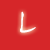
<style>
.page{position:relative;width:50px;height:50px;background:#d62629}
.page>*{position:absolute;margin:0}
.t1{font:30px "SketchFlowPrint";color:#ffffff}
</style>
<div class="page">
<p class="t1" style="left:20px;top:11px;width:16px;height:22px">L</p>
</div>
